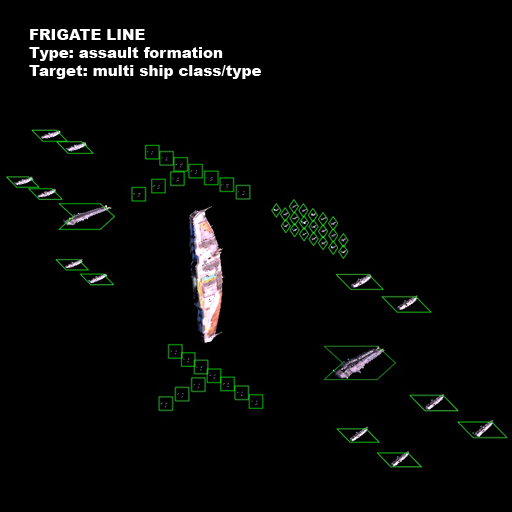
<style>
.page{position:relative;width:512px;height:512px;background:#000000}
.page>*{position:absolute;margin:0}
.t1{font:15px "Arial-Black";color:#ffffff}
</style>
<div class="page">
<p class="t1" style="left:29px;top:29px;width:232px;height:50px">FRIGATE LINE<br>Type: assault formation<br>Target: multi ship class/type</p>
</div>
